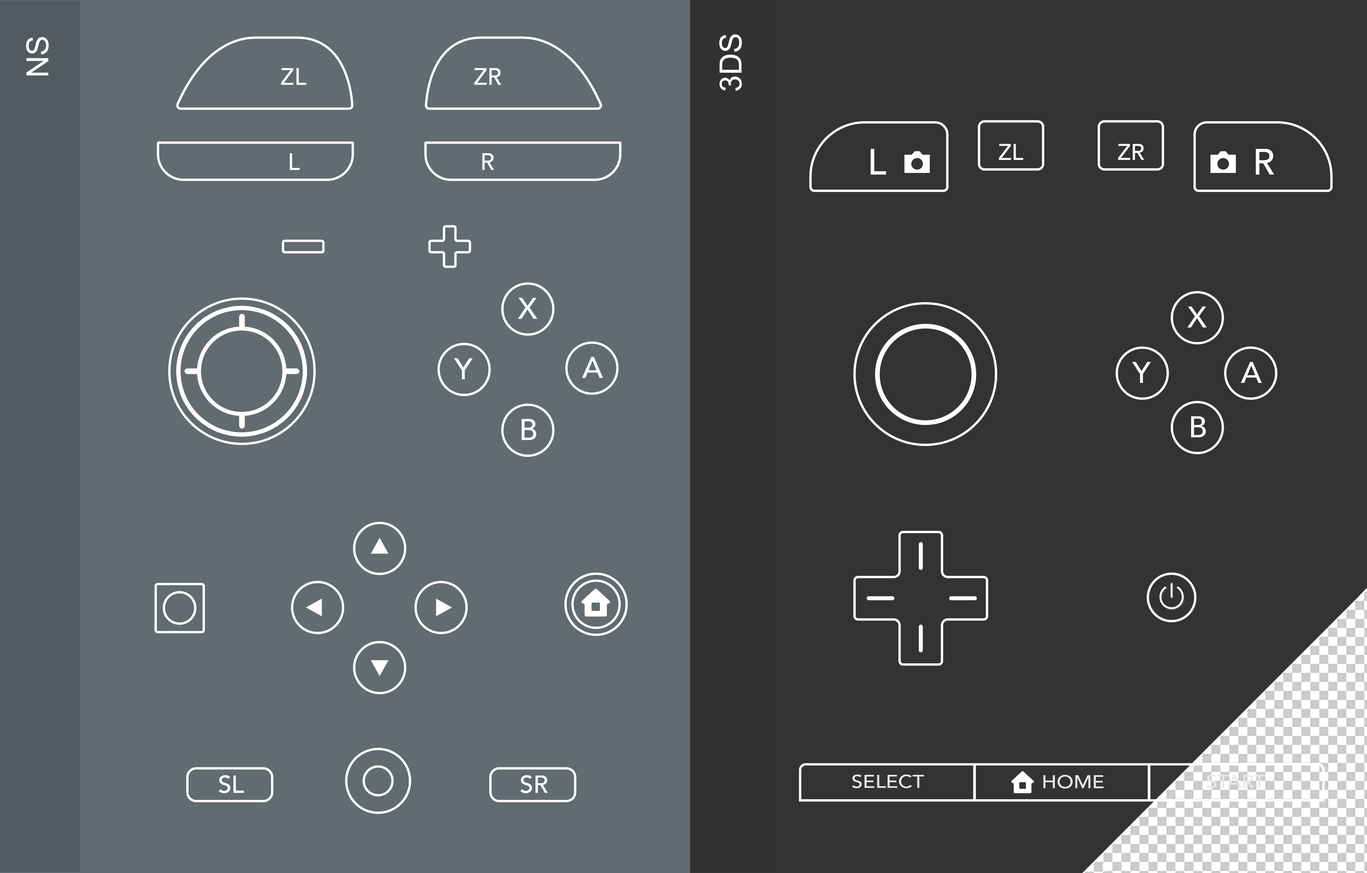
<style>
.page{position:relative;width:1367px;height:873px;background:#626b70}
.page>*{position:absolute;margin:0}
.t1{font:30.5px "ArialMT";color:#ffffff}
.t2{font:23.4px "Avenir-Medium";color:#ffffff}
.t3{font:36.2px "Avenir-Medium";color:#ffffff}
.t4{font:22.6px "Avenir-Medium";color:#ffffff}
.t5{font:29.5px "Avenir-Medium";color:#ffffff}
.t6{font:24.2px "Avenir-Medium";color:#ffffff}
.t7{font:18.4px "Avenir-Medium";color:#e7e9eb;scale:1.11 1}
</style>
<div class="page">
<p class="t1" style="left:26px;top:37px;width:23px;height:38px;rotate:-90deg">NS</p>
<p class="t1" style="left:719px;top:34px;width:23px;height:57px;rotate:-90deg">3DS</p>
<p class="t2" style="left:281px;top:68px;width:25px;height:17px">ZL</p>
<p class="t2" style="left:474px;top:68px;width:27px;height:17px">ZR</p>
<p class="t3" style="left:870px;top:149px;width:16px;height:26px">L</p>
<p class="t4" style="left:999px;top:144px;width:24px;height:16px">ZL</p>
<p class="t4" style="left:1118px;top:144px;width:26px;height:16px">ZR</p>
<p class="t3" style="left:1255px;top:149px;width:19px;height:26px">R</p>
<p class="t2" style="left:290px;top:153px;width:10px;height:17px">L</p>
<p class="t2" style="left:482px;top:153px;width:12px;height:17px">R</p>
<p class="t5" style="left:518px;top:298px;width:19px;height:21px">X</p>
<p class="t5" style="left:1187px;top:306px;width:20px;height:21px">X</p>
<p class="t5" style="left:454px;top:358px;width:19px;height:21px">Y</p>
<p class="t5" style="left:582px;top:357px;width:21px;height:21px">A</p>
<p class="t5" style="left:1132px;top:362px;width:19px;height:21px">Y</p>
<p class="t5" style="left:1241px;top:362px;width:21px;height:21px">A</p>
<p class="t5" style="left:522px;top:419px;width:14px;height:21px">B</p>
<p class="t5" style="left:1191px;top:416px;width:15px;height:21px">B</p>
<p class="t6" style="left:219px;top:775px;width:25px;height:18px">SL</p>
<p class="t6" style="left:520px;top:775px;width:28px;height:18px">SR</p>
<p class="t7" style="left:852px;top:774px;width:72px;height:14px">SELECT</p>
<p class="t7" style="left:1043px;top:774px;width:60px;height:14px">HOME</p>
</div>
